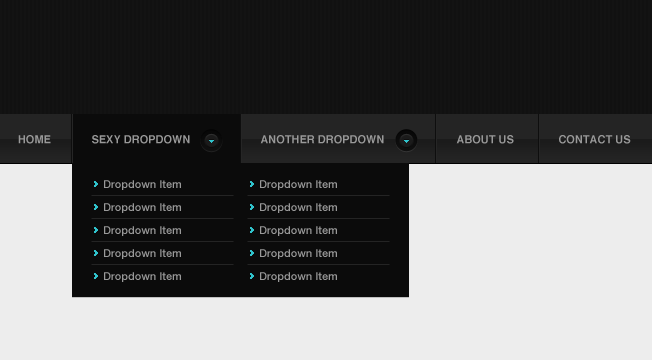
<style>
.page{position:relative;width:652px;height:360px;background:#ededed}
.page>*{position:absolute;margin:0}
.t1{font:11px "Helvetica-Bold";color:#999999;text-transform:uppercase}
.t2{font:11px/23px "HelveticaNeueLTCom-Md";color:#999999}
</style>
<div class="page">
<p class="t1" style="left:18px;top:135px;width:33px;height:9px">HOME</p>
<p class="t1" style="left:92px;top:135px;width:98px;height:9px">Sexy Dropdown</p>
<p class="t1" style="left:260px;top:135px;width:124px;height:9px">another Dropdown</p>
<p class="t1" style="left:456px;top:135px;width:58px;height:9px">about us</p>
<p class="t1" style="left:559px;top:135px;width:72px;height:9px">Contact Us</p>
<p class="t2" style="left:104px;top:180px;width:77px;height:102px">Dropdown Item<br>Dropdown Item <br>Dropdown Item <br>Dropdown Item <br>Dropdown Item</p>
<p class="t2" style="left:260px;top:180px;width:77px;height:102px">Dropdown Item<br>Dropdown Item <br>Dropdown Item <br>Dropdown Item <br>Dropdown Item</p>
</div>
